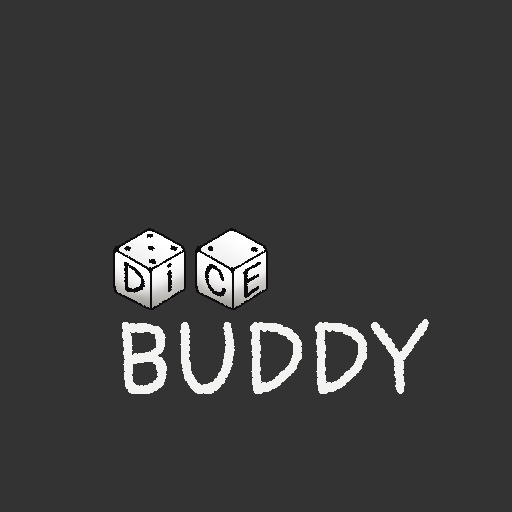
<style>
.page{position:relative;width:512px;height:512px;background:#333333}
.page>*{position:absolute;margin:0}
.t1{font:40px "Pangolin-Regular";letter-spacing:0.025em;color:#0e0c0e;scale:1.14 1}
.t2{font:40px "Pangolin-Regular";letter-spacing:0.025em;color:#0e0c0e;scale:1.16 1}
.t3{font:100px "Pangolin-Regular";letter-spacing:0.025em;color:#f3f3f2}
</style>
<div class="page">
<p class="t1" style="left:124px;top:262px;width:21px;height:31px;rotate:29deg">D</p>
<p class="t2" style="left:167px;top:263px;width:5px;height:29px;rotate:-30deg">i</p>
<p class="t1" style="left:205px;top:264px;width:21px;height:33px;rotate:29deg">C</p>
<p class="t2" style="left:243px;top:262px;width:18px;height:36px;rotate:-30deg">E</p>
<p class="t3" style="left:122px;top:319px;width:307px;height:75px">BUDDY</p>
</div>
